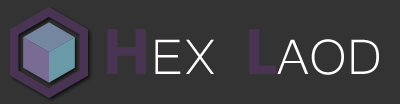
<style>
.page{position:relative;width:400px;height:104px;background:#333333}
.page>*{position:absolute;margin:0}
.t1{font:64px "Microsoft-Yi-Baiti";color:#ffffff;text-transform:uppercase}
.t2{font:64px "MicrosoftTaiLe-Bold";color:#4a3454;text-transform:uppercase}
</style>
<div class="page">
<p class="t1" style="left:107px;top:29px;width:272px;height:46px"><span class="t2">H</span>ex <span class="t2">L</span>aod</p>
</div>
